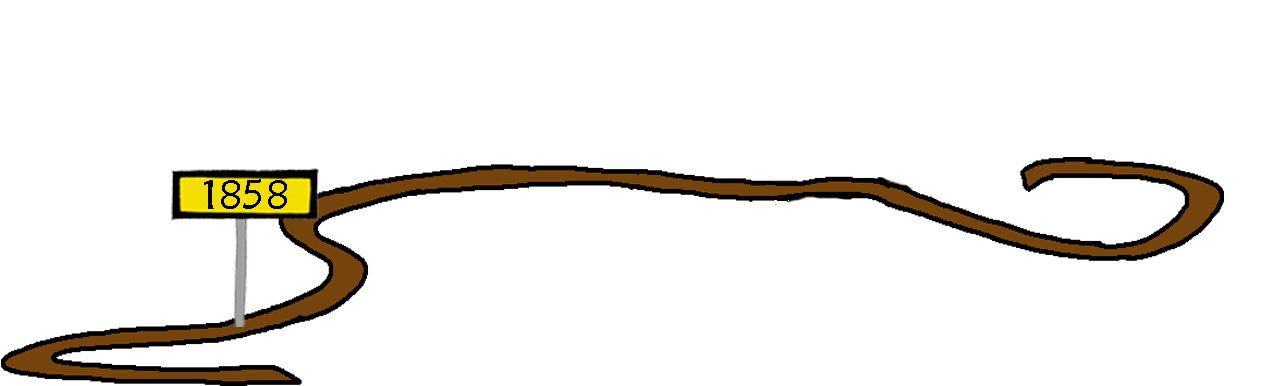
<style>
.page{position:relative;width:1278px;height:386px;background:#ffffff}
.page>*{position:absolute;margin:0}
.t1{font:41.7px "MaiandraGD-Regular";color:#000000}
</style>
<div class="page">
<p class="t1" style="left:204px;top:179px;width:83px;height:30px">1858</p>
</div>
